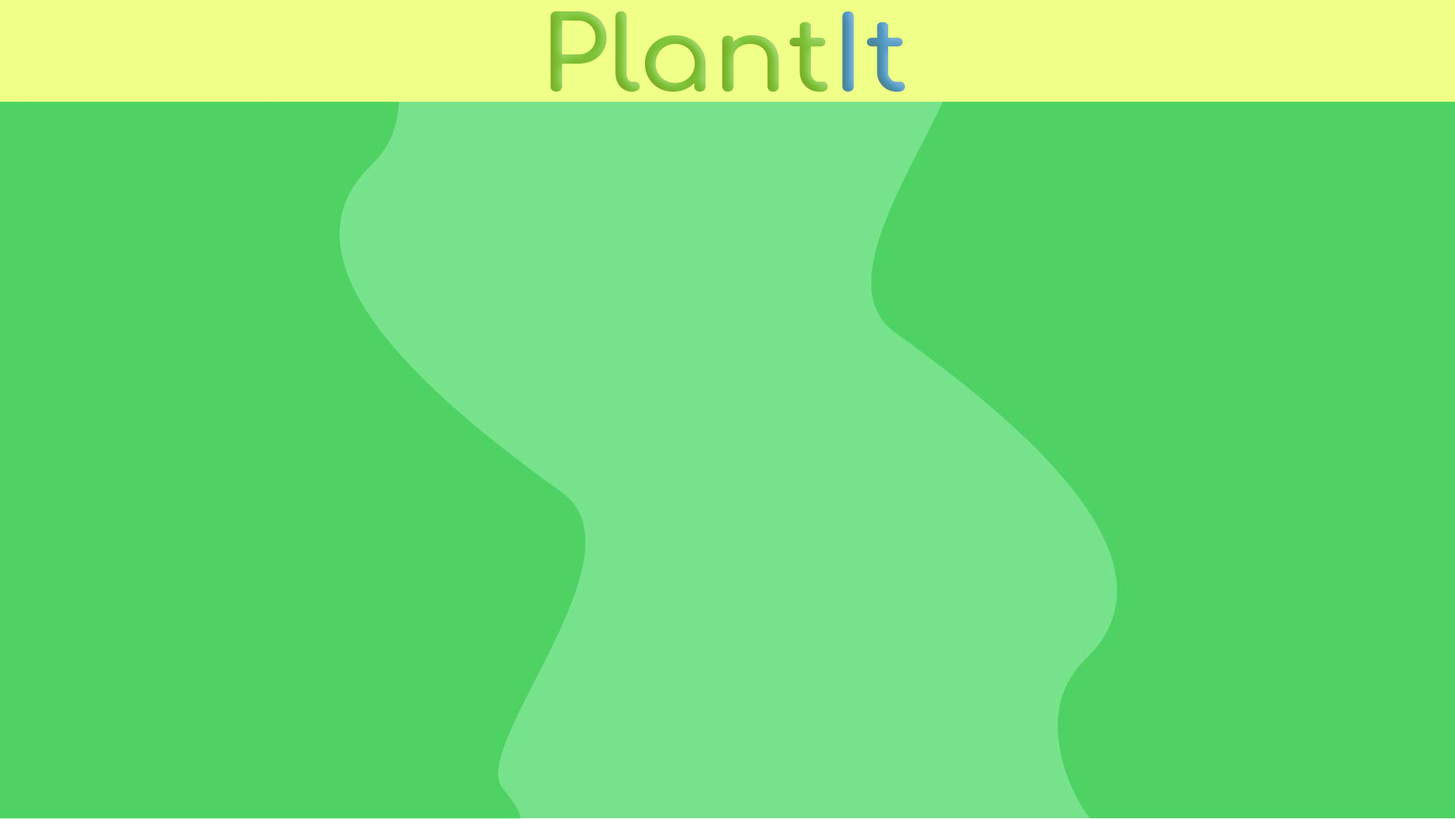
<style>
.page{position:relative;width:1455px;height:819px;background:#4fd164}
.page>*{position:absolute;margin:0}
.t1{font:103.2px "Comfortaa-Bold";color:#7dc437;scale:1.07 1}
.t2{font:103.2px "Comfortaa-Bold";color:#4e97c4;scale:1.07 1}
</style>
<div class="page">
<p class="t1" style="left:550px;top:11px;width:356px;height:81px">Plant<span class="t2">It</span></p>
</div>
